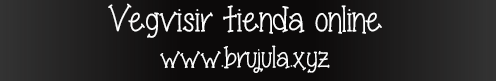
<style>
.page{position:relative;width:496px;height:81px;background:#0c0a0a}
.page>*{position:absolute;margin:0}
.t1{font:36px "Miss-Smarty-Pants";color:#ffffff}
.t2{font:30px "Miss-Smarty-Pants";color:#ffffff}
</style>
<div class="page">
<p class="t1" style="left:108px;top:3px;width:274px;height:70px;text-align:center">Vegvisir tienda online<br><span class="t2">www.brujula.xyz</span></p>
</div>
